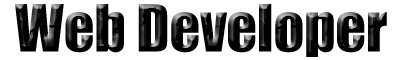
<style>
.page{position:relative;width:400px;height:60px;background:#ffffff}
.page>*{position:absolute;margin:0}
.t1{font:60px "Impact";color:#000000}
</style>
<div class="page">
<p class="t1" style="left:15px;top:4px;width:372px;height:53px">Web Developer</p>
</div>
